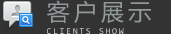
<style>
.page{position:relative;width:171px;height:34px;background:#333333}
.page>*{position:absolute;margin:0}
.t1{font:23px "YaHei-Consolas-Hybrid";letter-spacing:0.18em;color:#91989a}
.t2{font:9px "YaHei-Consolas-Hybrid";letter-spacing:0.18em;color:#cccccc}
</style>
<div class="page">
<p class="t1" style="left:47px;top:0px;width:104px;height:23px">客户展示</p>
<p class="t2" style="left:47px;top:28px;width:77px;height:6px">CLIENTS SHOW</p>
</div>
